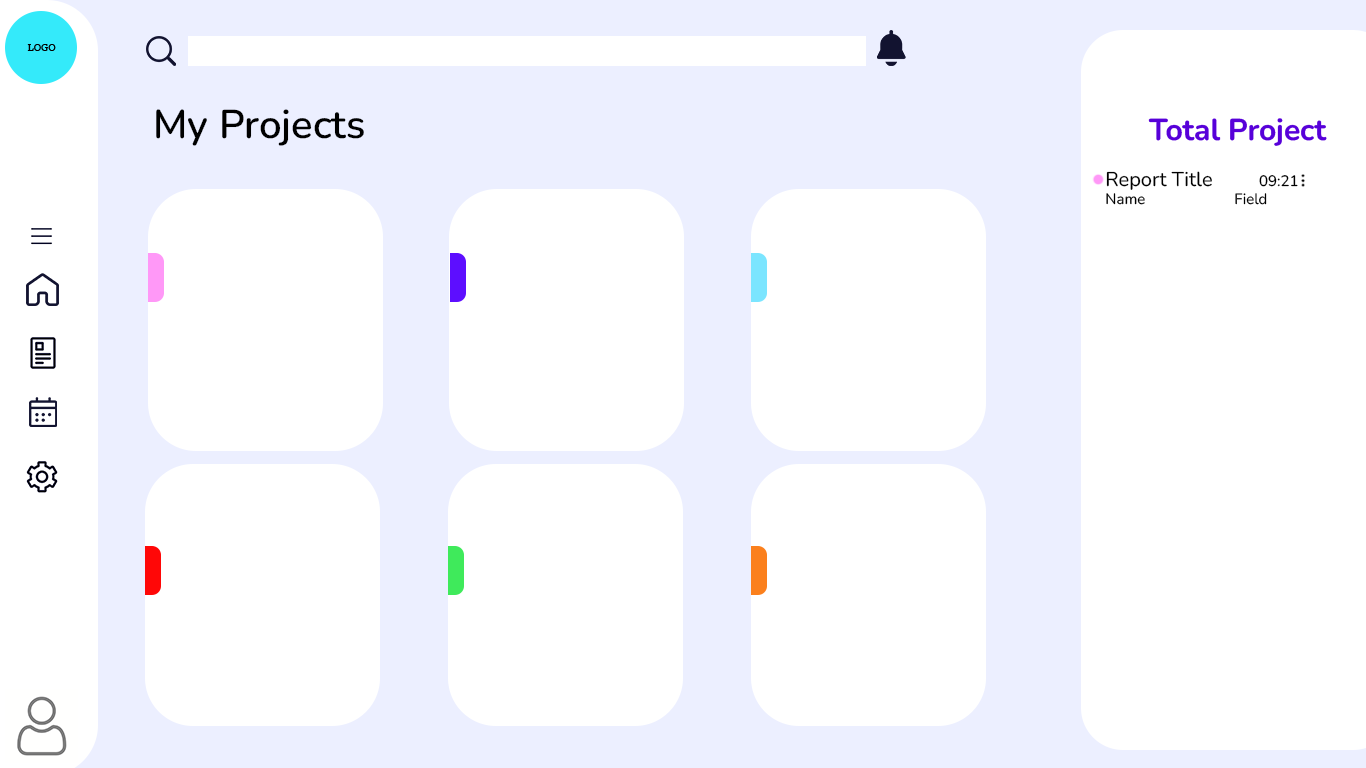
<style>
.page{position:relative;width:1366px;height:768px;background:#ffffff}
.page>*{position:absolute;margin:0}
.t1{font:40px "Nunito-SemiBold";color:#000000}
.t2{font:15px "Nunito-Regular";color:#000000}
.t3{font:20px "Nunito-Regular";color:#000000}
</style>
<div class="page">
<p class="t1" style="left:156px;top:109px;width:208px;height:37px">My Projects</p>
<p class="t2" style="left:1106px;top:171px;width:192px;height:34px"><span class="t3">Report Title         </span>09:21<br>Name                       Field</p>
</div>
